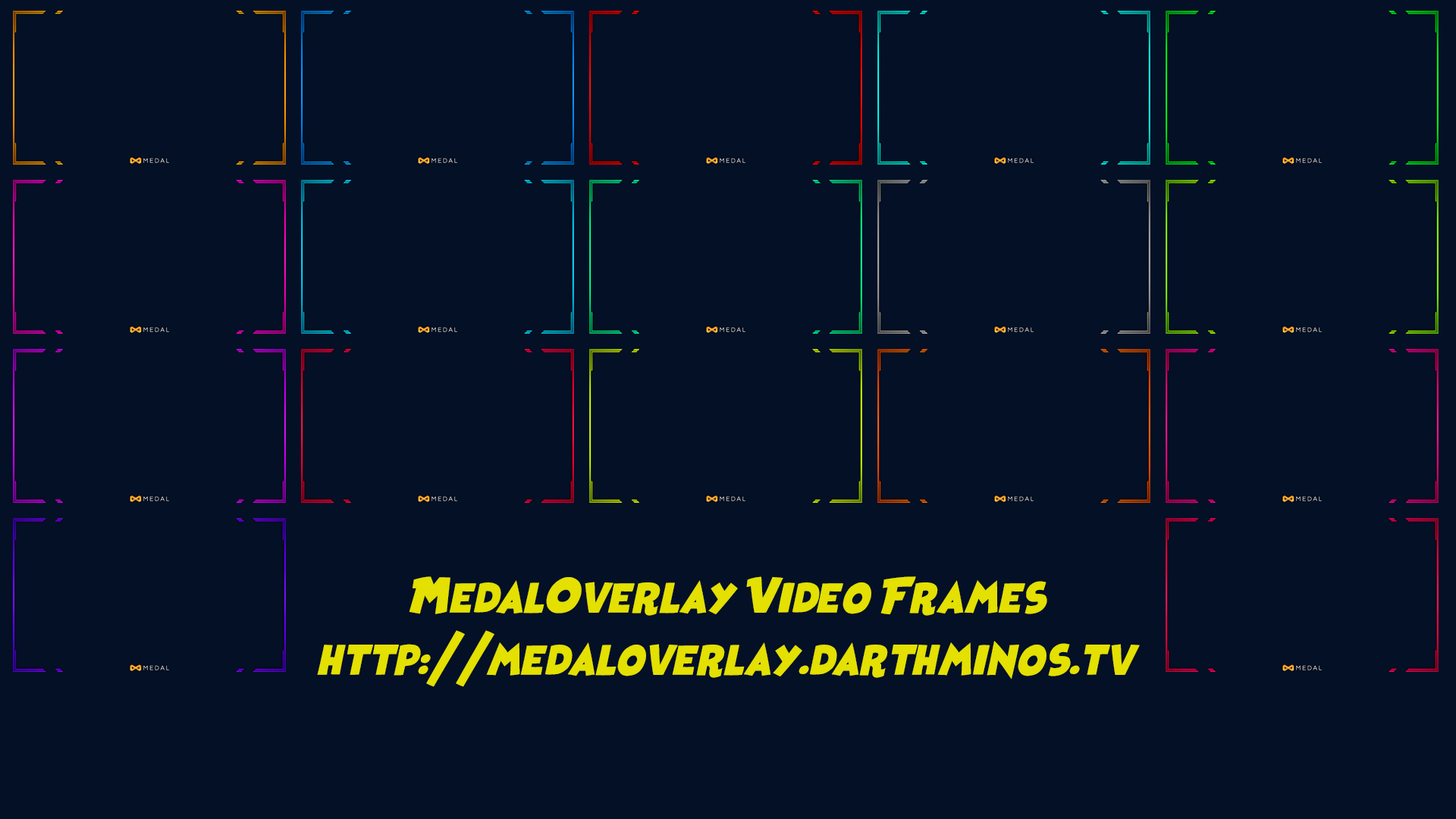
<style>
.page{position:relative;width:1456px;height:819px;background:#031026}
.page>*{position:absolute;margin:0}
.t1{font:28.1px "HeroesLegend";color:#e3e002}
.t2{font:28.1px/60.7px "HeroesLegend";color:#e3e002}
</style>
<div class="page">
<p class="t1" style="left:409px;top:576px;width:638px;height:40px">MedalOverlay Video Frames</p>
<p class="t2" style="left:317px;top:630px;width:823px;height:57px;text-align:center">http://medaloverlay.darthminos.tv</p>
</div>
